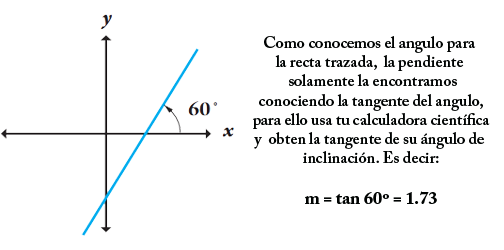
<style>
.page{position:relative;width:504px;height:250px;background:#ffffff}
.page>*{position:absolute;margin:0}
.t1{font:16px "ACaslonPro-Semibold";color:#000302}
.t2{font:18px "ACaslonPro-Bold";color:#000302}
</style>
<div class="page">
<p class="t1" style="left:253px;top:36px;width:237px;height:168px;text-align:center">Como conocemos el angulo para <br>la recta trazada,  la pendiente <br> solamente la encontramos<br>conociendo la tangente del angulo,<br>para ello usa tu calculadora científica<br>y  obten la tangente de su ángulo de <br>inclinación. Es decir:<br><br><span class="t2">m = tan 60º = 1.73</span></p>
</div>
